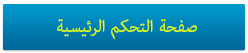
<style>
.page{position:relative;width:248px;height:53px}
.page>*{position:absolute;margin:0}
.t1{font:24px "AdobeArabic-Regular";color:#dafa05}
</style>
<div class="page">
<p class="t1" style="left:57px;top:19px;width:140px;height:21px">صفحة التحكم الرئيسية</p>
</div>
